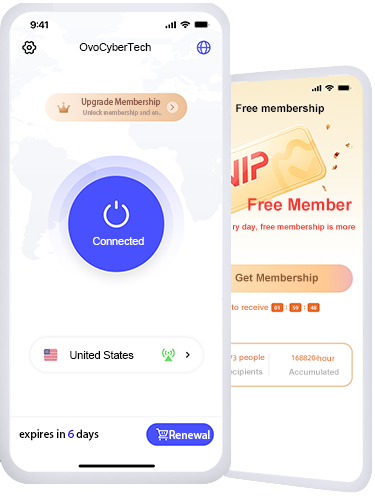
<style>
.page{position:relative;width:375px;height:500px;background:#ffffff}
.page>*{position:absolute;margin:0}
.t1{font:10.7px "ArialMT";color:#000000}
.t2{font:8px "AdobeHeitiStd-Regular";color:#926351}
.t3{font:6px "AdobeHeitiStd-Regular";color:#b59b8f}
.t4{font:10.7px "Arial-BoldMT";color:#000000}
.t5{font:17px "Arial-BoldMT";color:#f5362e}
.t6{font:10.7px "ArialMT";color:#ffffff}
.t7{font:10.7px "Arial-BoldMT";color:#895934}
.t8{font:8px "Arial-BoldMT"}
.t9{font:8px "Arial-BoldMT";color:#eb7c44}
.t10{font:8px "Arial-BoldMT";color:#afafaf}
.t11{font:10.7px "AdobeHeitiStd-Regular";color:#000000}
.t12{font:10.7px "AdobeHeitiStd-Regular";color:#2a00ff}
.t13{font:10.7px "AdobeHeitiStd-Regular";color:#ffffff}
</style>
<div class="page">
<p class="t1" style="left:79px;top:43px;width:72px;height:10px">OvoCyberTech</p>
<p class="t2" style="left:81px;top:98px;width:80px;height:9px">Upgrade Membership</p>
<p class="t3" style="left:83px;top:109px;width:79px;height:7px">Unlock membership and en..</p>
<p class="t4" style="left:236px;top:104px;width:88px;height:11px">Free membership</p>
<p class="t5" style="left:248px;top:198px;width:104px;height:13px">Free Member</p>
<p class="t6" style="left:93px;top:237px;width:51px;height:8px">Connected</p>
<p class="t7" style="left:235px;top:273px;width:83px;height:11px">Get Membership</p>
<p class="t1" style="left:70px;top:351px;width:64px;height:8px">United States</p>
<p class="t8" style="left:239px;top:354px;width:26px;height:8px">people</p>
<p class="t9" style="left:317px;top:355px;width:18px;height:6px">hour</p>
<p class="t10" style="left:288px;top:369px;width:51px;height:6px">Accumulated</p>
<p class="t11" style="left:19px;top:429px;width:80px;height:12px">expires in <span class="t12">6 </span>days</p>
<p class="t13" style="left:169px;top:430px;width:41px;height:9px">Renewal</p>
</div>
